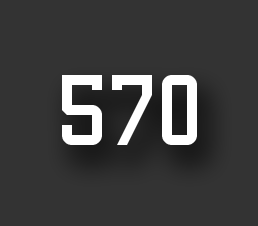
<style>
.page{position:relative;width:258px;height:226px;background:#333333}
.page>*{position:absolute;margin:0}
.t1{font:80px "Manteka";color:#ffffff}
</style>
<div class="page">
<p class="t1" style="left:62px;top:75px;width:135px;height:70px">570</p>
</div>
